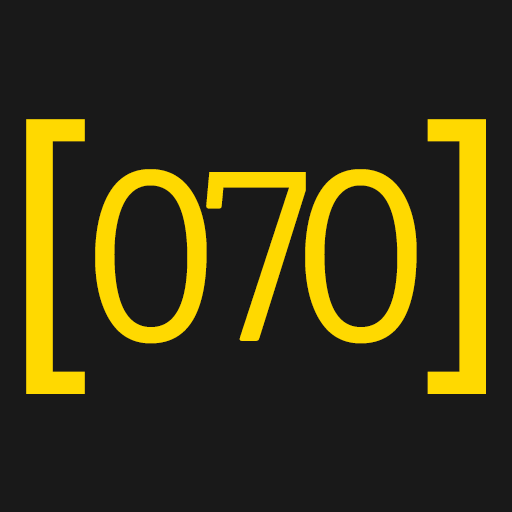
<style>
.page{position:relative;width:512px;height:512px;background:#191919}
.page>*{position:absolute;margin:0}
.t1{font:300px "ArialUnicodeMS";color:#ffd900}
.t2{font:250px "LevenimMT";color:#ffd900}
</style>
<div class="page">
<p class="t1" style="left:26px;top:119px;width:460px;height:275px">[    ]</p>
<p class="t2" style="left:95px;top:169px;width:322px;height:175px">070</p>
</div>
